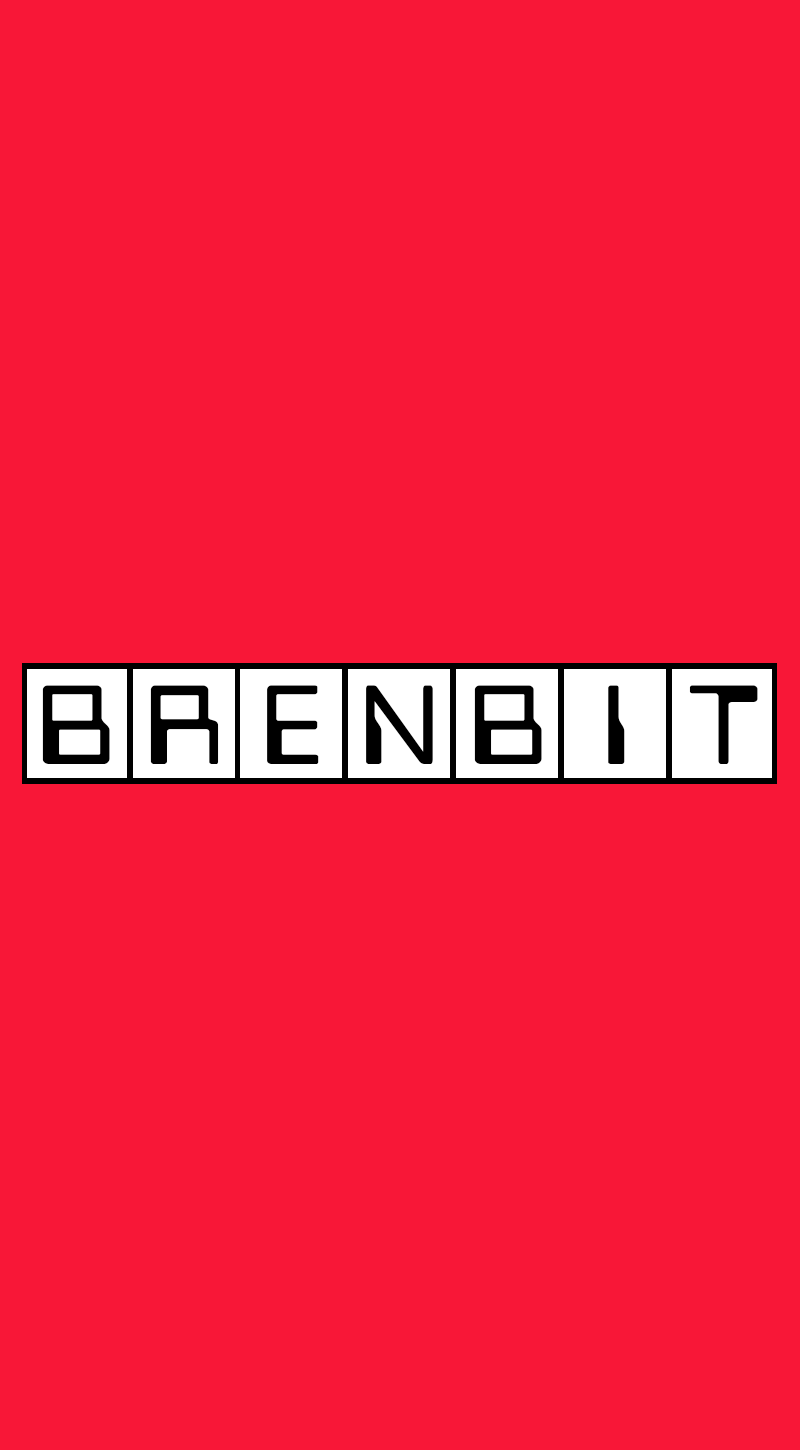
<style>
.page{position:relative;width:800px;height:1450px;background:#f81737}
.page>*{position:absolute;margin:0}
.t1{font:111.1px "bitwise";letter-spacing:0.03em;color:#000000;text-transform:uppercase}
</style>
<div class="page">
<p class="t1" style="left:42px;top:685px;width:68px;height:79px">b</p>
<p class="t1" style="left:150px;top:685px;width:69px;height:79px">r</p>
<p class="t1" style="left:267px;top:685px;width:52px;height:79px">e</p>
<p class="t1" style="left:366px;top:685px;width:67px;height:79px">n</p>
<p class="t1" style="left:474px;top:685px;width:68px;height:79px">b</p>
<p class="t1" style="left:608px;top:685px;width:17px;height:79px">i</p>
<p class="t1" style="left:689px;top:685px;width:69px;height:79px">t</p>
</div>
